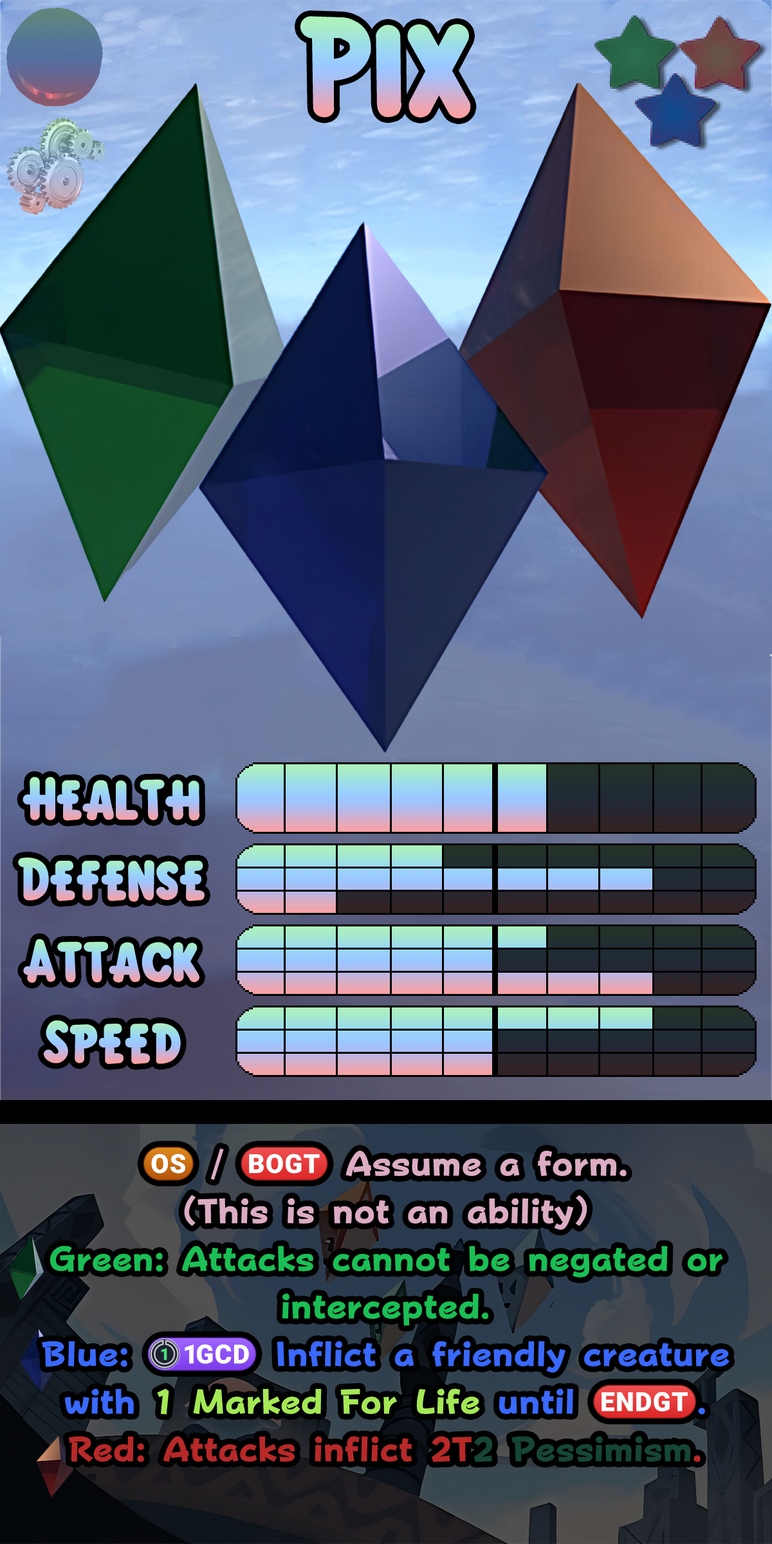
<style>
.page{position:relative;width:772px;height:1544px}
.page>*{position:absolute;margin:0}
.t1{font:222px "KirbyClassic"}
.t2{font:92.7px "KirbyClassic"}
.t3{font:59.2px/47.6px "FOTPopHappinessStrp-ExtraBold";color:#1bbf55}
.t4{font:59.2px/47.6px "stoogedings-Regular";letter-spacing:0.5em;color:#dbacc3}
.t5{font:59.2px/47.6px "FOTPopHappinessStrp-ExtraBold";letter-spacing:0.5em;color:#dbacc3}
.t6{font:59.2px/47.6px "stoogedings-Regular";color:#dbacc3}
.t7{font:59.2px/47.6px "FOTPopHappinessStrp-ExtraBold";color:#dbacc3}
.t8{font:59.2px/47.6px "FOTPopHappinessStrp-ExtraBold";color:#3a69fe}
.t9{font:59.2px/47.6px "stoogedings-Regular";color:#3a69fe}
.t10{font:59.2px/47.6px "FOTPopHappinessStrp-ExtraBold";color:#a5e856}
.t11{font:59.2px/47.6px "FOTPopHappinessStrp-ExtraBold";color:#b82929}
.t12{font:59.2px/47.6px "FOTPopHappinessStrp-ExtraBold";color:#164635}
</style>
<div class="page">
<p class="t1" style="left:300px;top:16px;width:171px;height:102px">Pix</p>
<p class="t2" style="left:23px;top:777px;width:177px;height:44px">Health</p>
<p class="t2" style="left:18px;top:858px;width:187px;height:44px">Defense</p>
<p class="t2" style="left:23px;top:939px;width:176px;height:44px">Attack</p>
<p class="t2" style="left:43px;top:1021px;width:138px;height:43px">Speed</p>
<p class="t3" style="left:42px;top:1147px;width:688px;height:316px;text-align:center"><span class="t4">(OS)</span><span class="t5">/</span><span class="t6">(BOGT)</span><span class="t7"> Assume a form. <br>(This is not an ability)</span><br>Green: Attacks cannot be negated or intercepted.<br><span class="t8">Blue: </span><span class="t9">(1GCD)</span><span class="t8"> Inflict a friendly creature with </span><span class="t10">1 Marked For Life</span><span class="t8"> until </span><span class="t9">(ENDGT)</span><span class="t8">.<br></span><span class="t11">Red: Attacks inflict 2T</span><span class="t12">2 Pessimism</span><span class="t11">.</span></p>
</div>
